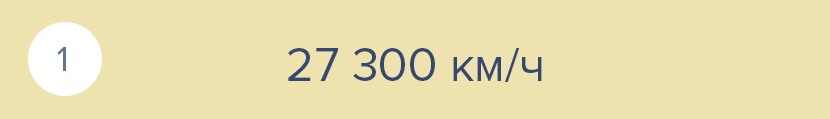
<style>
.page{position:relative;width:830px;height:119px;background:#eee2af}
.page>*{position:absolute;margin:0}
.t1{font:36px "ProximaNova-Regular";color:#647493}
.t2{font:48px "ProximaNova-Regular";color:#344870}
</style>
<div class="page">
<p class="t1" style="left:57px;top:47px;width:9px;height:24px">1</p>
<p class="t2" style="left:288px;top:48px;width:254px;height:34px">27 300 км/ч</p>
</div>
